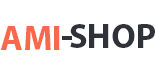
<style>
.page{position:relative;width:155px;height:70px;background:#ffffff}
.page>*{position:absolute;margin:0}
.t1{font:34.7px "MyriadPro-Bold";color:#f8694a}
.t2{font:34.7px "MyriadPro-Bold";color:#30323a}
</style>
<div class="page">
<p class="t1" style="left:0px;top:26px;width:60px;height:24px">AMI</p>
<p class="t2" style="left:70px;top:24px;width:85px;height:24px">SHOP</p>
</div>
